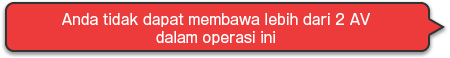
<style>
.page{position:relative;width:450px;height:58px;background:#ed3b3b}
.page>*{position:absolute;margin:0}
.t1{font:14px/18px "GothicMB101Pro-Regular";color:#ffffff}
</style>
<div class="page">
<p class="t1" style="left:62px;top:13px;width:308px;height:32px;text-align:center">Anda tidak dapat membawa lebih dari 2 AV<br>dalam operasi ini</p>
</div>
